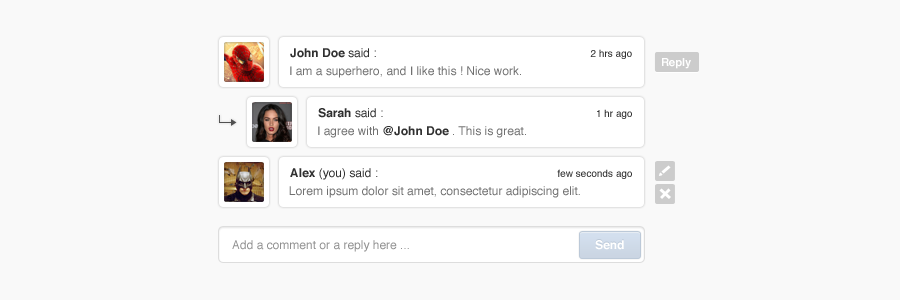
<style>
.page{position:relative;width:900px;height:300px;background:#f9f9f9}
.page>*{position:absolute;margin:0}
.t1{font:10px "Helvetica";color:#303030}
.t2{font:12px "Helvetica-Bold";color:#303030}
.t3{font:12px "Helvetica";color:#303030}
.t4{font:11px "Helvetica-Bold";color:#ffffff}
.t5{font:12px "Helvetica";color:#707070}
.t6{font:12px "Helvetica";color:#909090}
.t7{font:12px "Helvetica-Bold";color:#ffffff}
</style>
<div class="page">
<p class="t1" style="left:290px;top:48px;width:342px;height:11px"><span class="t2">John Doe</span><span class="t3"> said :                                                                </span>2 hrs ago</p>
<p class="t4" style="left:662px;top:58px;width:29px;height:11px">Reply</p>
<p class="t5" style="left:290px;top:66px;width:231px;height:12px">I am a superhero, and I like this ! Nice work.</p>
<p class="t1" style="left:318px;top:108px;width:314px;height:11px"><span class="t2">Sarah</span><span class="t3"> said :                                                               </span>1 hr ago</p>
<p class="t5" style="left:318px;top:126px;width:208px;height:12px">I agree with <span class="t2">@John Doe </span>. This is great.</p>
<p class="t1" style="left:290px;top:168px;width:342px;height:12px"><span class="t2">Alex</span><span class="t3"> (you) said :                                                     </span>few seconds ago</p>
<p class="t5" style="left:289px;top:186px;width:291px;height:12px">Lorem ipsum dolor sit amet, consectetur adipiscing elit.</p>
<p class="t6" style="left:232px;top:240px;width:177px;height:12px">Add a comment or a reply here ...</p>
<p class="t7" style="left:595px;top:240px;width:29px;height:10px">Send</p>
</div>
